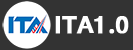
<style>
.page{position:relative;width:133px;height:50px;background:#333333}
.page>*{position:absolute;margin:0}
.t1{font:35.6px "PSLKandaExtra";color:#ffffff;font-weight:bold}
</style>
<div class="page">
<p class="t1" style="left:55px;top:16px;width:74px;height:18px">ITA1.0</p>
</div>
